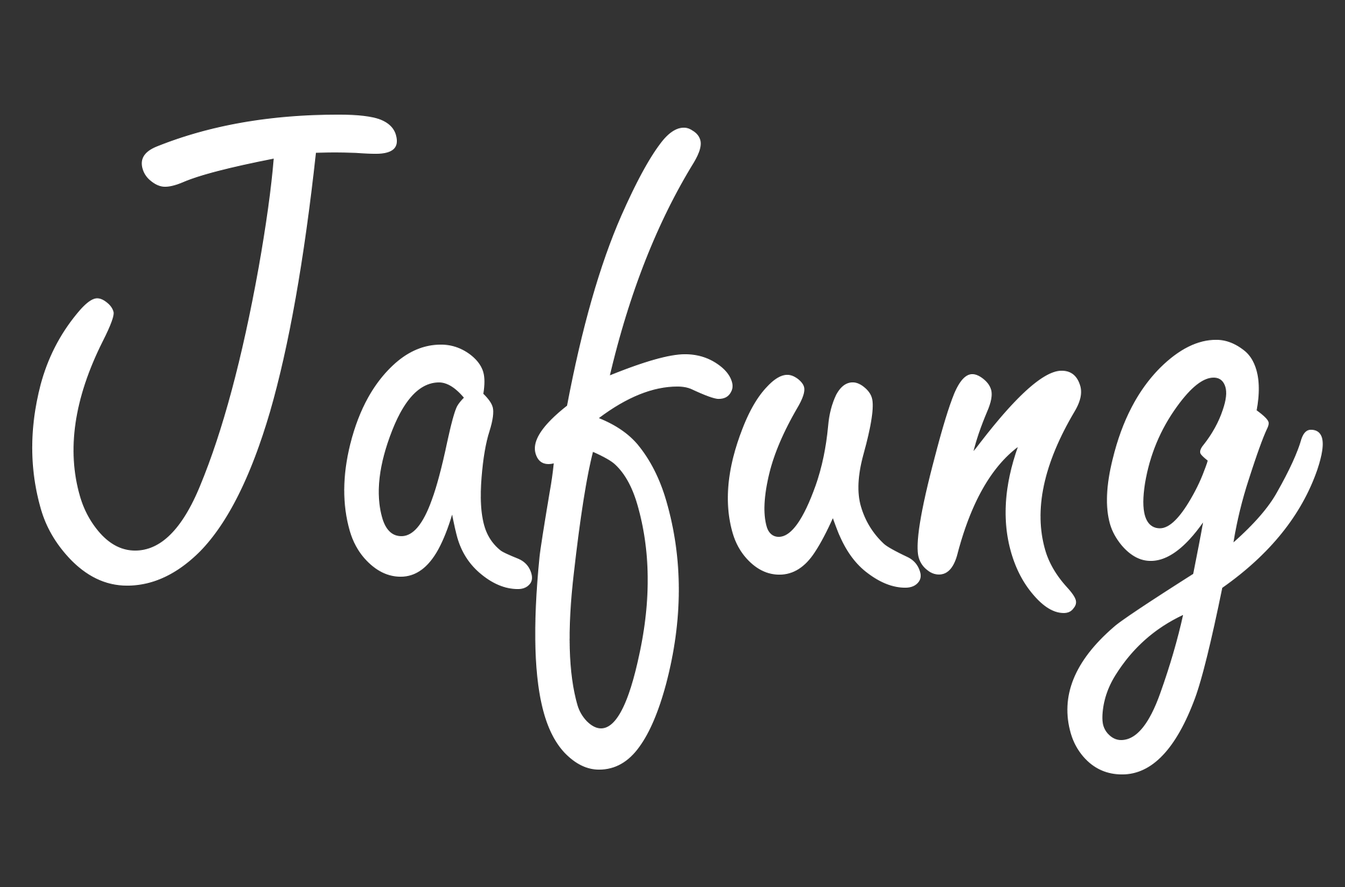
<style>
.page{position:relative;width:1345px;height:887px;background:#333333}
.page>*{position:absolute;margin:0}
.t1{font:753.1px "FreestyleScript-Regular";color:#ffffff}
</style>
<div class="page">
<p class="t1" style="left:32px;top:115px;width:1291px;height:659px">Jafung</p>
</div>
